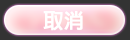
<style>
.page{position:relative;width:130px;height:40px;background:#333333}
.page>*{position:absolute;margin:0}
.t1{font:20px "AdobeFanHeitiStd-Bold";color:#ffffff;font-weight:bold}
</style>
<div class="page">
<p class="t1" style="left:43px;top:11px;width:40px;height:20px">取消</p>
</div>
